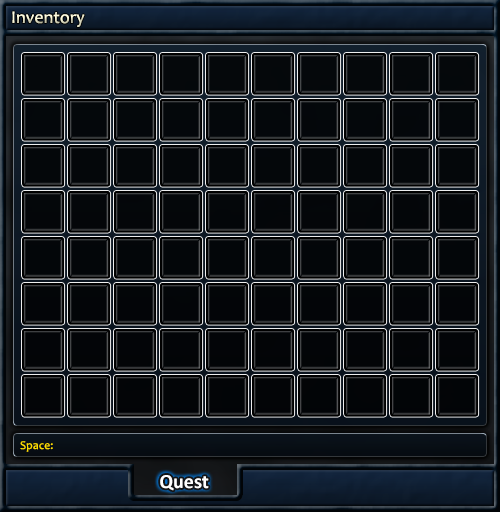
<style>
.page{position:relative;width:500px;height:512px}
.page>*{position:absolute;margin:0}
.t1{font:18px "Candara";color:#fefcdd}
.t2{font:12px "Candara";color:#fedd00}
.t3{font:20px "Calibri-Bold";color:#ffffff}
</style>
<div class="page">
<p class="t1" style="left:12px;top:11px;width:73px;height:16px">Inventory</p>
<p class="t2" style="left:20px;top:441px;width:33px;height:11px">Space:</p>
<p class="t3" style="left:160px;top:475px;width:49px;height:16px">Quest</p>
</div>
